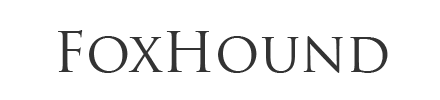
<style>
.page{position:relative;width:440px;height:100px;background:#ffffff}
.page>*{position:absolute;margin:0}
.t1{font:55px "TrajanPro-Regular";color:#333333}
</style>
<div class="page">
<p class="t1" style="left:58px;top:30px;width:330px;height:43px">FoxHound</p>
</div>
